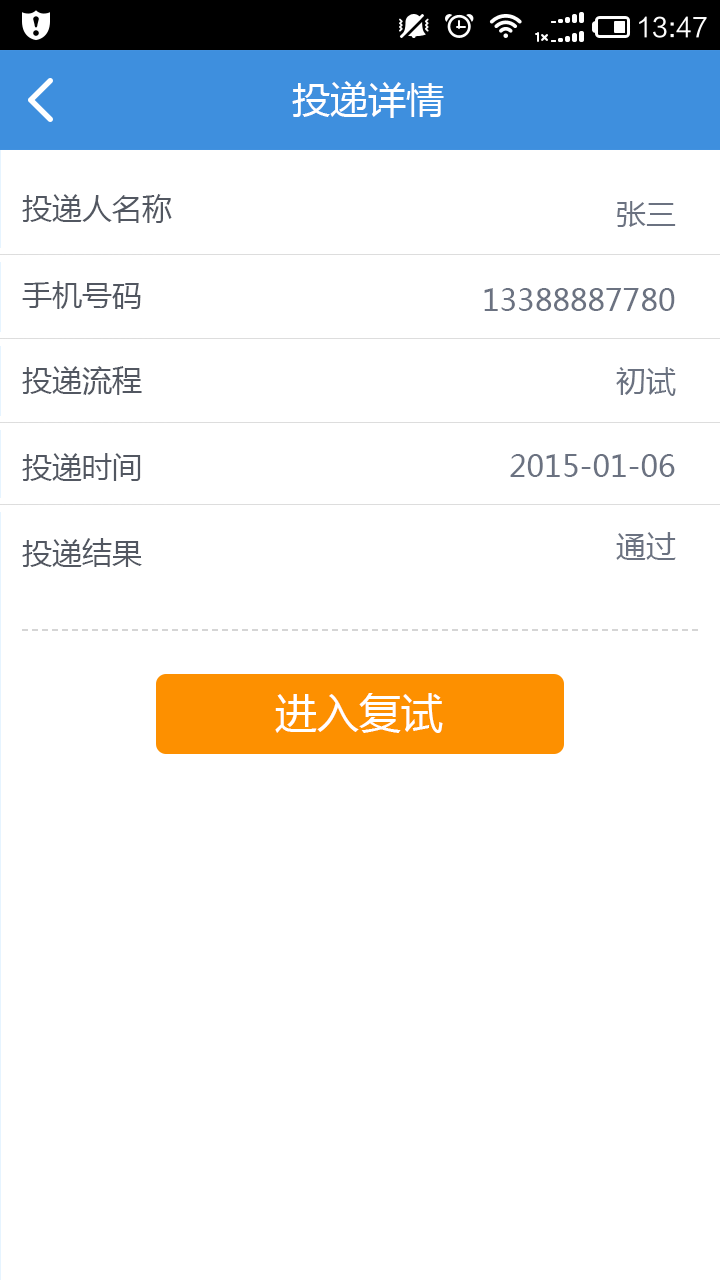
<style>
.page{position:relative;width:720px;height:1280px;background:#ffffff}
.page>*{position:absolute;margin:0}
.t1{font:38px "MicrosoftYaHei";color:#ffffff}
.t2{font:30px "MicrosoftYaHei";color:#525761}
.t3{font:30px "MicrosoftYaHei";color:#6b7281}
.t4{font:42px "MicrosoftYaHei";color:#ffffff}
</style>
<div class="page">
<p class="t1" style="left:292px;top:81px;width:152px;height:37px">投递详情</p>
<p class="t2" style="left:22px;top:194px;width:150px;height:29px">投递人名称</p>
<p class="t3" style="left:617px;top:201px;width:59px;height:26px">张三</p>
<p class="t2" style="left:22px;top:281px;width:119px;height:28px">手机号码</p>
<p class="t3" style="left:484px;top:288px;width:191px;height:23px">13388887780</p>
<p class="t2" style="left:22px;top:366px;width:120px;height:29px">投递流程</p>
<p class="t3" style="left:616px;top:367px;width:60px;height:29px">初试</p>
<p class="t2" style="left:22px;top:453px;width:119px;height:28px">投递时间</p>
<p class="t3" style="left:510px;top:454px;width:165px;height:23px">2015-01-06</p>
<p class="t3" style="left:616px;top:532px;width:60px;height:28px">通过</p>
<p class="t2" style="left:22px;top:538px;width:120px;height:29px">投递结果</p>
<p class="t4" style="left:275px;top:693px;width:168px;height:40px">进入复试</p>
</div>
